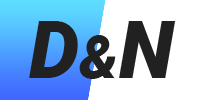
<style>
.page{position:relative;width:200px;height:100px;background:#ffffff}
.page>*{position:absolute;margin:0}
.t1{font:80px "Roboto-BlackItalic";color:#212121}
.t2{font:60px "Roboto-BlackItalic";color:#212121}
</style>
<div class="page">
<p class="t1" style="left:29px;top:21px;width:147px;height:58px">D<span class="t2">&amp;</span>N</p>
</div>
